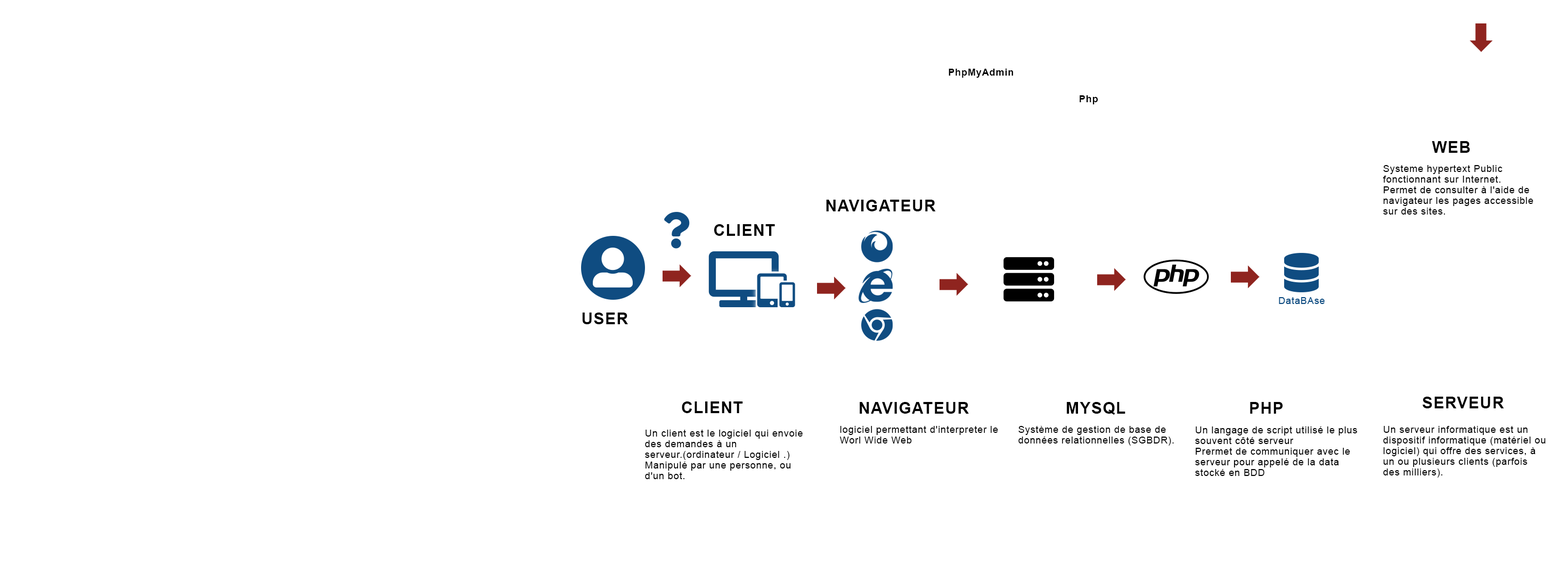
<style>
.page{position:relative;width:1568px;height:575px;background:#ffffff}
.page>*{position:absolute;margin:0}
.t1{font:9.6px "Arial-BoldMT";letter-spacing:0.05em;color:#000000}
.t2{font:16px "Arial-BoldMT";letter-spacing:0.05em;color:#000000;text-transform:uppercase}
.t3{font:9.6px/10.7px "ArialMT";letter-spacing:0.05em;color:#000000}
.t4{font:9.6px "ArialMT";letter-spacing:0.05em;color:#0f4c81}
</style>
<div class="page">
<p class="t1" style="left:949px;top:69px;width:64px;height:9px">PhpMyAdmin</p>
<p class="t1" style="left:1080px;top:95px;width:18px;height:9px">Php</p>
<p class="t2" style="left:1432px;top:141px;width:38px;height:12px">Web</p>
<p class="t3" style="left:1383px;top:165px;width:150px;height:50px">Systeme hypertext Public fonctionnant sur Internet. <br>Permet de consulter à l'aide de navigateur les pages accessible sur des sites.</p>
<p class="t2" style="left:826px;top:200px;width:110px;height:11px">Navigateur</p>
<p class="t2" style="left:714px;top:224px;width:61px;height:12px">Client</p>
<p class="t4" style="left:1279px;top:297px;width:46px;height:7px">DataBAse</p>
<p class="t2" style="left:582px;top:313px;width:46px;height:11px">User</p>
<p class="t2" style="left:682px;top:402px;width:61px;height:11px">Client</p>
<p class="t2" style="left:1423px;top:397px;width:81px;height:12px">Serveur</p>
<p class="t2" style="left:860px;top:402px;width:109px;height:12px">Navigateur</p>
<p class="t2" style="left:1067px;top:402px;width:58px;height:13px">MySql</p>
<p class="t2" style="left:1250px;top:402px;width:33px;height:12px">php</p>
<p class="t3" style="left:645px;top:430px;width:158px;height:49px">Un client est le logiciel qui envoie des demandes à un serveur.(ordinateur / Logiciel .)<br>Manipulé par une personne, ou d'un bot.</p>
<p class="t3" style="left:840px;top:426px;width:158px;height:18px">logiciel permettant d'interpreter le Worl Wide Web</p>
<p class="t3" style="left:1018px;top:426px;width:156px;height:20px">Système de gestion de base de données relationnelles (SGBDR).</p>
<p class="t3" style="left:1195px;top:427px;width:162px;height:49px">Un langage de script utilisé le plus souvent côté serveur <br>Prermet de communiquer avec le serveur pour appelé de la data stocké en BDD</p>
<p class="t3" style="left:1383px;top:426px;width:163px;height:52px">Un serveur informatique est un dispositif informatique (matériel ou logiciel) qui offre des services, à un ou plusieurs clients (parfois des milliers).<br>L</p>
</div>
